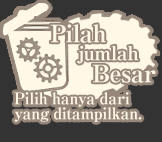
<style>
.page{position:relative;width:162px;height:142px;background:#333333}
.page>*{position:absolute;margin:0}
.t1{font:16px/15px "RyuminPro-ExBold";letter-spacing:-0.04em;color:#fff8e6}
</style>
<div class="page">
<p class="t1" style="left:14px;top:92px;width:128px;height:30px">Pilih hanya dari<br>yang ditampilkan.</p>
</div>
